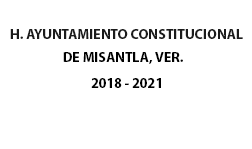
<style>
.page{position:relative;width:252px;height:149px;background:#ffffff}
.page>*{position:absolute;margin:0}
.t1{font:14px "MyriadPro-Bold";color:#1b1b1b}
.t2{font:14px "MyriadPro-Bold";color:#000000}
.t3{font:14px "MyriadPro-Bold";color:#010101}
</style>
<div class="page">
<p class="t1" style="left:10px;top:29px;width:233px;height:10px">H. AYUNTAMIENTO CONSTITUCIONAL</p>
<p class="t2" style="left:63px;top:52px;width:120px;height:12px">DE MISANTLA, VER.</p>
<p class="t3" style="left:91px;top:78px;width:70px;height:10px">2018 - 2021</p>
</div>
